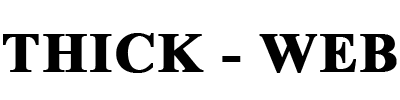
<style>
.page{position:relative;width:400px;height:100px;background:#ffffff}
.page>*{position:absolute;margin:0}
.t1{font:56.3px "TimesNewRomanPS-BoldMT";letter-spacing:0.025em;color:#000000;text-transform:uppercase;font-weight:bold}
</style>
<div class="page">
<p class="t1" style="left:3px;top:33px;width:394px;height:40px">Thick - Web</p>
</div>
